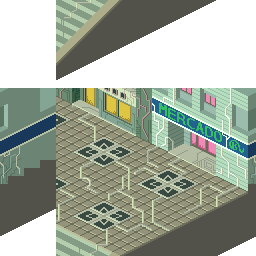
<style>
.page{position:relative;width:256px;height:256px;background:#ffffff}
.page>*{position:absolute;margin:0}
.t1{font:14.2px "DejaVuSansMono";color:#39bd6b;font-weight:bold;scale:1.12 1}
.t2{font:14.2px "DejaVuSansMono";color:#39bd6b;font-weight:bold;scale:1.14 1}
</style>
<div class="page">
<p class="t1" style="left:159px;top:103px;width:63px;height:39px;rotate:26deg">ME<span class="t2">R</span>CADO</p>
</div>
